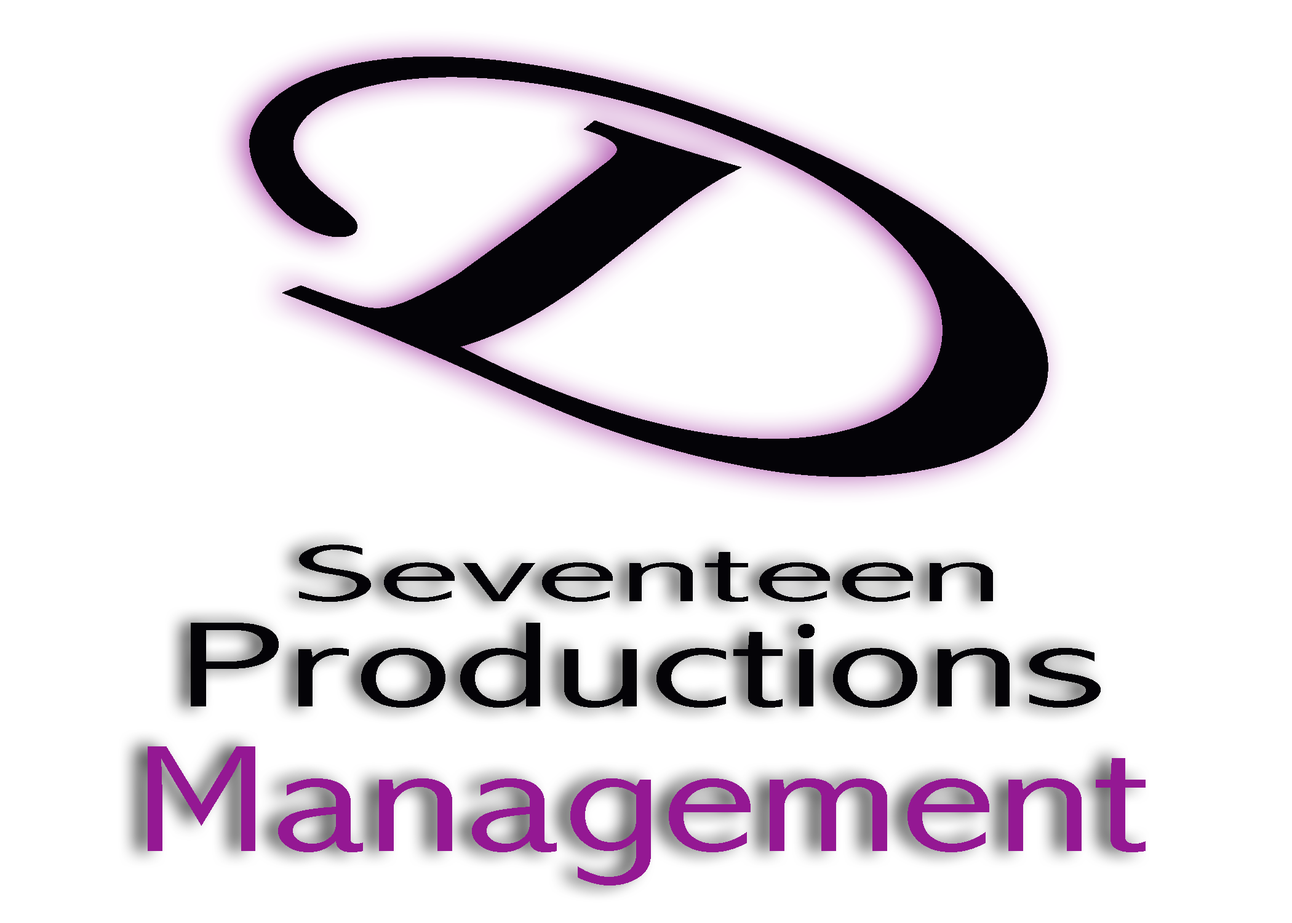
<style>
.page{position:relative;width:1292px;height:923px;background:#ffffff}
.page>*{position:absolute;margin:0}
.t1{font:566.3px "MonotypeCorsiva";color:#040307;scale:2.15 1}
.t2{font:82px "AbadiMT-CondensedLight";color:#040307;scale:2.49 1}
.t3{font:123.1px "AbadiMT-CondensedLight";color:#040307;scale:1.89 1}
.t4{font:153.8px "AbadiMT-CondensedLight";color:#941893;scale:1.53 1}
</style>
<div class="page">
<p class="t1" style="left:249px;top:57px;width:799px;height:420px;rotate:22deg">D</p>
<p class="t2" style="left:299px;top:545px;width:694px;height:57px">Seventeen</p>
<p class="t3" style="left:191px;top:623px;width:910px;height:85px">Productions</p>
<p class="t4" style="left:148px;top:746px;width:998px;height:139px">Management</p>
</div>
